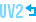
<style>
.page{position:relative;width:36px;height:22px;background:#ffffff}
.page>*{position:absolute;margin:0}
.t1{font:20px "BebasNeue";color:#7bd9ff;text-transform:uppercase}
</style>
<div class="page">
<p class="t1" style="left:0px;top:4px;width:23px;height:14px">uv2</p>
</div>
